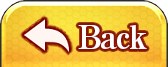
<style>
.page{position:relative;width:168px;height:67px}
.page>*{position:absolute;margin:0}
.t1{font:32px "RyuminPro-ExBold";letter-spacing:-0.08em;color:#ffffff}
</style>
<div class="page">
<p class="t1" style="left:78px;top:25px;width:69px;height:24px">Back</p>
</div>
